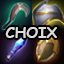
<style>
.page{position:relative;width:64px;height:64px}
.page>*{position:absolute;margin:0}
.t1{font:15px "ComicSansMS-Bold";color:#dcdcdc}
</style>
<div class="page">
<p class="t1" style="left:5px;top:27px;width:52px;height:11px">CHOIX</p>
</div>
